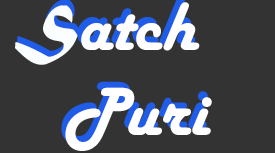
<style>
.page{position:relative;width:275px;height:153px;background:#333333}
.page>*{position:absolute;margin:0}
.t1{font:69.1px "MaturaMTScriptCapitals";color:#fafeff;scale:1.06 1}
.t2{font:69.1px "MaturaMTScriptCapitals";scale:1.06 1}
.t3{font:71px "HarlowSolid";color:#ffffff}
</style>
<div class="page">
<p class="t1" style="left:15px;top:5px;width:63px;height:60px">S</p>
<p class="t2" style="left:17px;top:0px;width:63px;height:59px">S</p>
<p class="t3" style="left:65px;top:2px;width:147px;height:149px;text-align:center">atch <br>Puri</p>
</div>
